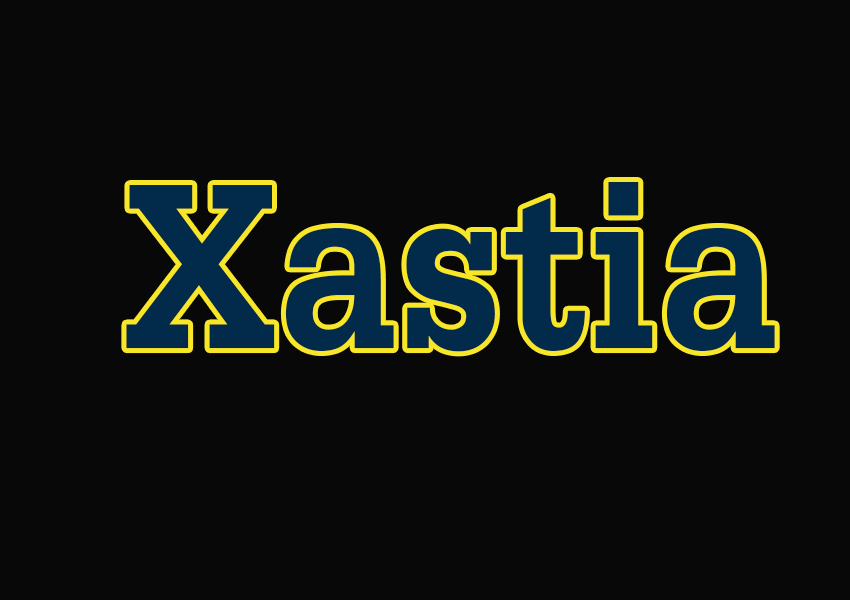
<style>
.page{position:relative;width:850px;height:600px;background:#090808}
.page>*{position:absolute;margin:0}
.t1{font:371.6px "DilleniaUPCBold";color:#022b4b}
</style>
<div class="page">
<p class="t1" style="left:126px;top:182px;width:649px;height:170px">Xastia</p>
</div>
